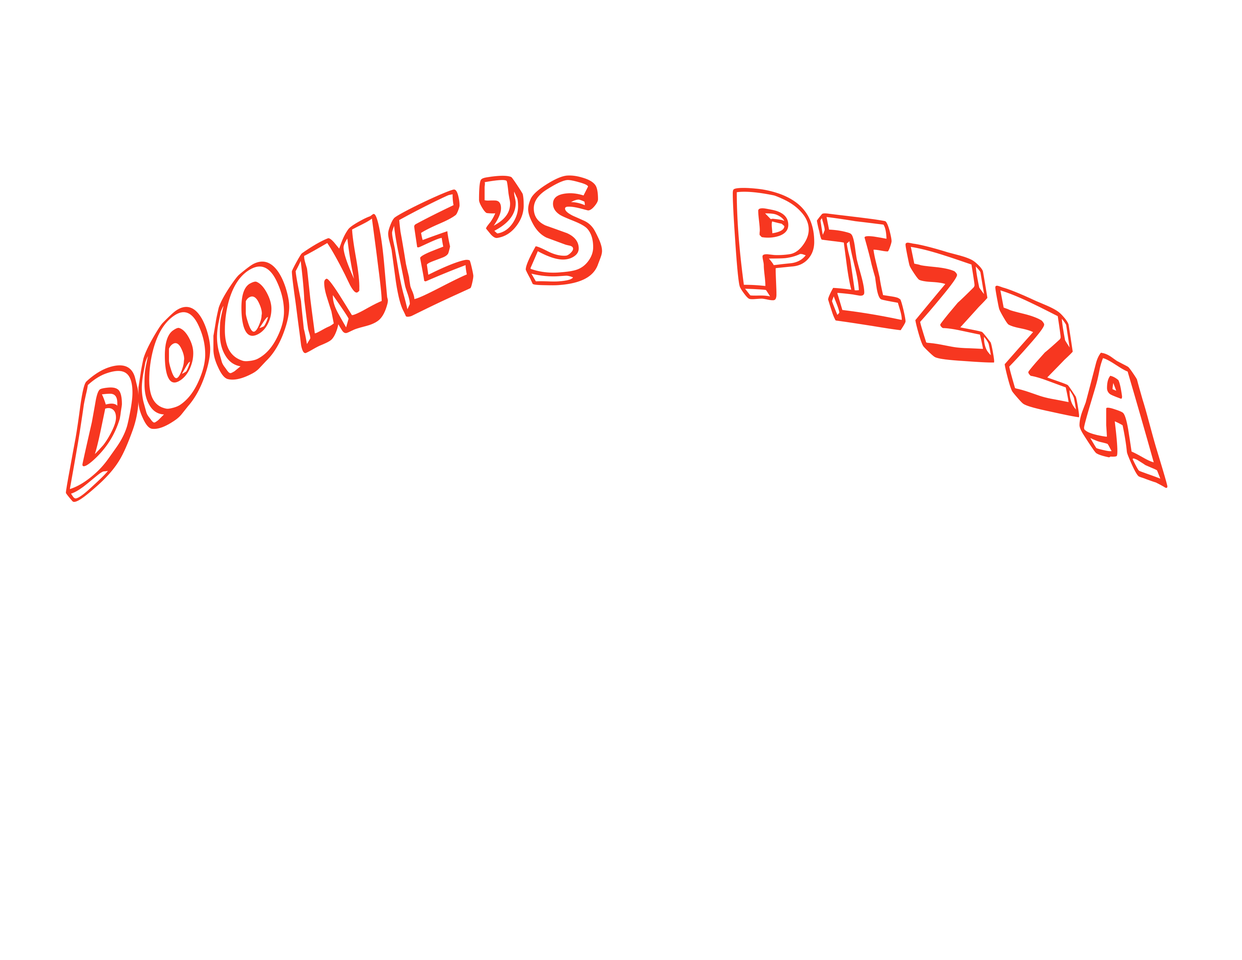
<style>
.page{position:relative;width:1242px;height:960px;background:#ffffff}
.page>*{position:absolute;margin:0}
.t1{font:148.2px "ActionJackson";letter-spacing:-0.03em;color:#f73720}
</style>
<div class="page">
<p class="t1" style="left:66px;top:175px;width:1102px;height:327px">Doone’s Pizza</p>
</div>
